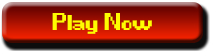
<style>
.page{position:relative;width:211px;height:51px}
.page>*{position:absolute;margin:0}
.t1{font:60px "Game-Over";color:#fffc00}
</style>
<div class="page">
<p class="t1" style="left:52px;top:13px;width:100px;height:21px">Play Now</p>
</div>
